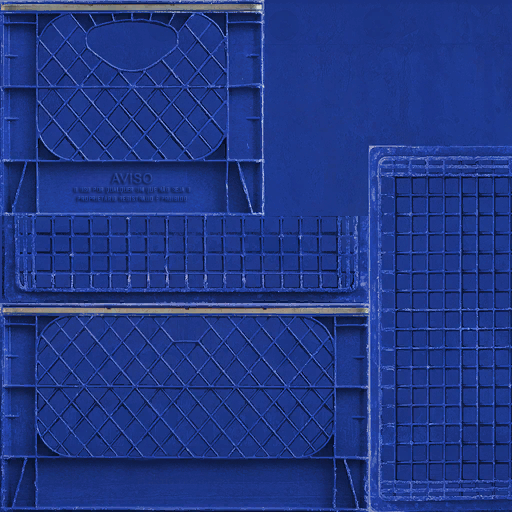
<style>
.page{position:relative;width:512px;height:512px}
.page>*{position:absolute;margin:0}
.t1{font:13.1px "ArialMT";letter-spacing:0.01em;color:#213e96;font-weight:bold}
.t2{font:7px "RefrigeratorDeluxe";letter-spacing:0.03em;color:#233f98;font-weight:bold;scale:1.07 1}
.t3{font:7px "RefrigeratorDeluxe";letter-spacing:0.05em;color:#24409a;font-weight:bold;scale:1.05 1}
</style>
<div class="page">
<p class="t1" style="left:111px;top:173px;width:42px;height:11px">AVISO</p>
<p class="t2" style="left:74px;top:186px;width:117px;height:9px">O USO POR QUALQUER UM QUE NÃO SEJA O</p>
<p class="t3" style="left:77px;top:194px;width:110px;height:8px">PROPRIETÁRIO REGISTRADO É PROIBIDO</p>
</div>
